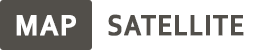
<style>
.page{position:relative;width:259px;height:50px;background:#ffffff}
.page>*{position:absolute;margin:0}
.t1{font:30.7px "Corbel-Bold";letter-spacing:0.02em;color:#ffffff;font-weight:bold;scale:0.92 1}
.t2{font:30.7px "Corbel-Bold";letter-spacing:0.02em;color:#524f4a;font-weight:bold;scale:0.86 1}
</style>
<div class="page">
<p class="t1" style="left:16px;top:15px;width:60px;height:21px">MAP</p>
<p class="t2" style="left:108px;top:14px;width:136px;height:22px">SATELLITE</p>
</div>
